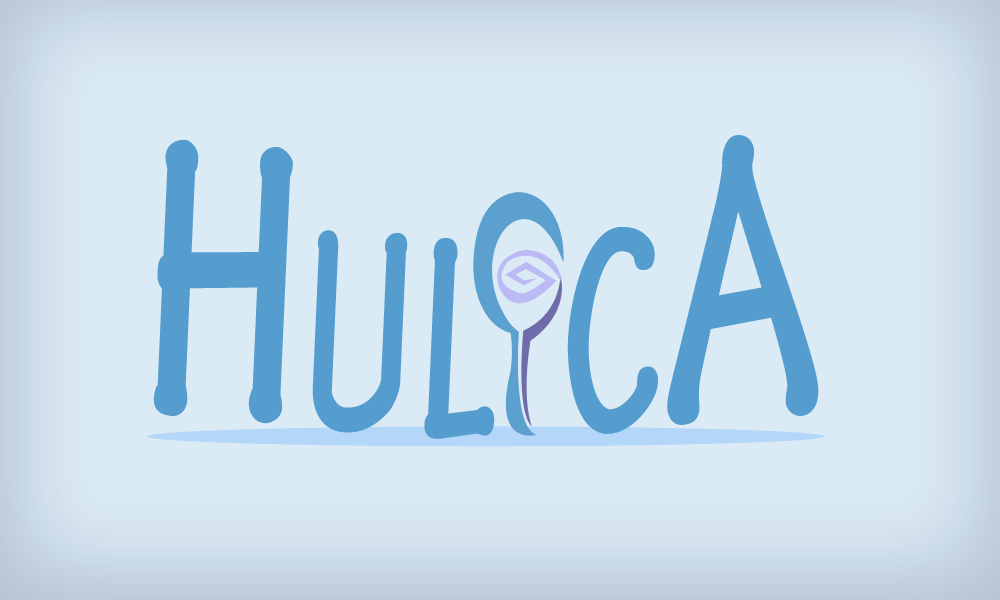
<style>
.page{position:relative;width:1000px;height:600px;background:#dbebf5}
.page>*{position:absolute;margin:0}
.t1{font:304.5px "TektonPro-BoldCond";color:#559dce;scale:0.76 1}
.t2{font:424.9px "TektonPro-BoldCond";color:#559dce;scale:0.76 1}
</style>
<div class="page">
<p class="t1" style="left:567px;top:135px;width:252px;height:299px;rotate:-4deg">C<span class="t2">A</span></p>
<p class="t1" style="left:153px;top:139px;width:342px;height:300px;rotate:4deg"><span class="t2">H</span>UL</p>
</div>
